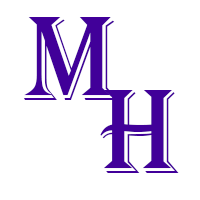
<style>
.page{position:relative;width:200px;height:200px;background:#ffffff}
.page>*{position:absolute;margin:0}
.t1{font:125px "Algerian";color:#410099}
</style>
<div class="page">
<p class="t1" style="left:23px;top:17px;width:95px;height:83px">M</p>
<p class="t1" style="left:100px;top:90px;width:79px;height:83px">H</p>
</div>
